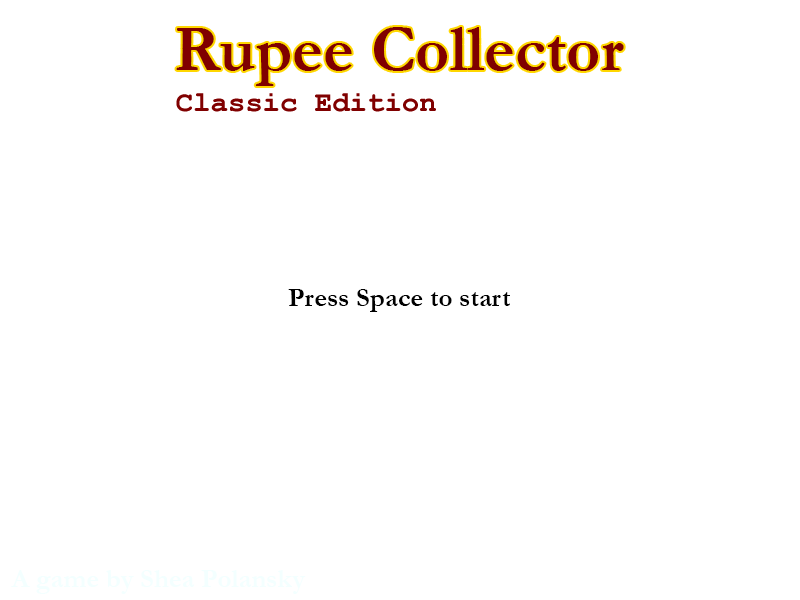
<style>
.page{position:relative;width:800px;height:600px;background:#ffffff}
.page>*{position:absolute;margin:0}
.t1{font:66px "Garamond-Bold";color:#800000}
.t2{font:29px "CourierNewPS-BoldMT";color:#800000}
.t3{font:27px "Garamond-Bold";color:#000000}
.t4{font:27px "Garamond-Bold";color:#f2fefe}
</style>
<div class="page">
<p class="t1" style="left:176px;top:27px;width:448px;height:59px">Rupee Collector</p>
<p class="t2" style="left:176px;top:93px;width:260px;height:19px">Classic Edition</p>
<p class="t3" style="left:288px;top:289px;width:222px;height:23px">Press Space to start</p>
<p class="t4" style="left:11px;top:570px;width:295px;height:24px">A game by Shea Polansky</p>
</div>
